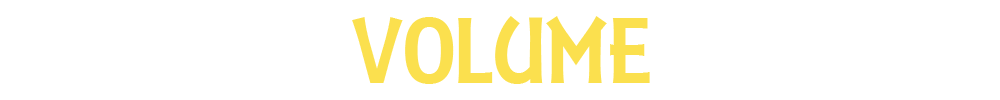
<style>
.page{position:relative;width:1000px;height:100px;background:#ffffff}
.page>*{position:absolute;margin:0}
.t1{font:100px "ARESSENCE";color:#fbe04e}
</style>
<div class="page">
<p class="t1" style="left:352px;top:16px;width:298px;height:68px">VOLUME</p>
</div>
